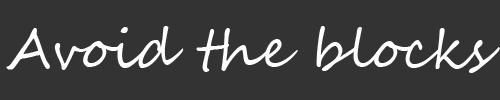
<style>
.page{position:relative;width:500px;height:100px;background:#333333}
.page>*{position:absolute;margin:0}
.t1{font:54.2px "SegoeScript";color:#ffffff}
</style>
<div class="page">
<p class="t1" style="left:6px;top:26px;width:494px;height:47px">Avoid the blocks</p>
</div>
